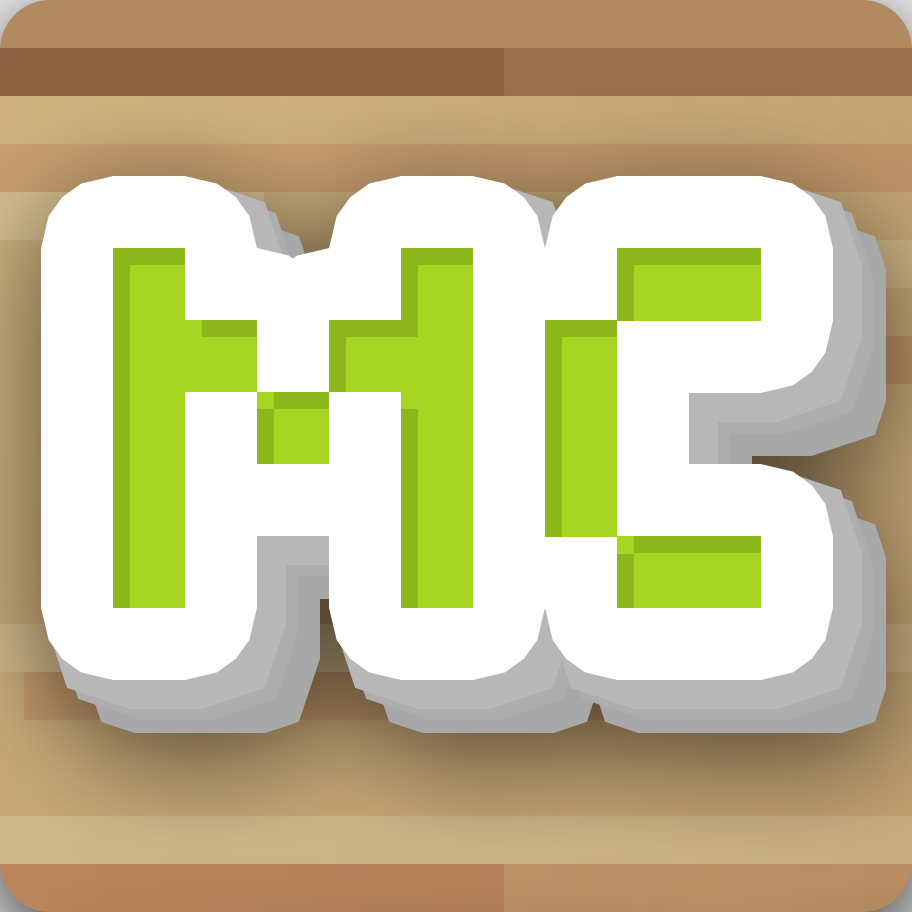
<style>
.page{position:relative;width:912px;height:912px;background:#ffffff}
.page>*{position:absolute;margin:0}
.t1{font:576px "04b03";color:#a5d621}
</style>
<div class="page">
<p class="t1" style="left:113px;top:248px;width:648px;height:360px">MC</p>
</div>
